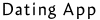
<style>
.page{position:relative;width:100px;height:20px;background:#ffffff}
.page>*{position:absolute;margin:0}
.t1{font:17.6px "Amira-Roman";letter-spacing:0.12em;color:#000000;scale:0.93 1}
</style>
<div class="page">
<p class="t1" style="left:3px;top:2px;width:93px;height:17px">Dating App</p>
</div>
